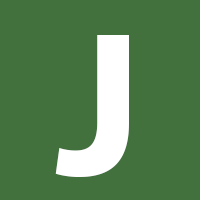
<style>
.page{position:relative;width:200px;height:200px;background:#42713e}
.page>*{position:absolute;margin:0}
.t1{font:208.3px "MyriadPro-Bold";color:#ffffff}
</style>
<div class="page">
<p class="t1" style="left:55px;top:35px;width:74px;height:142px">J</p>
</div>
